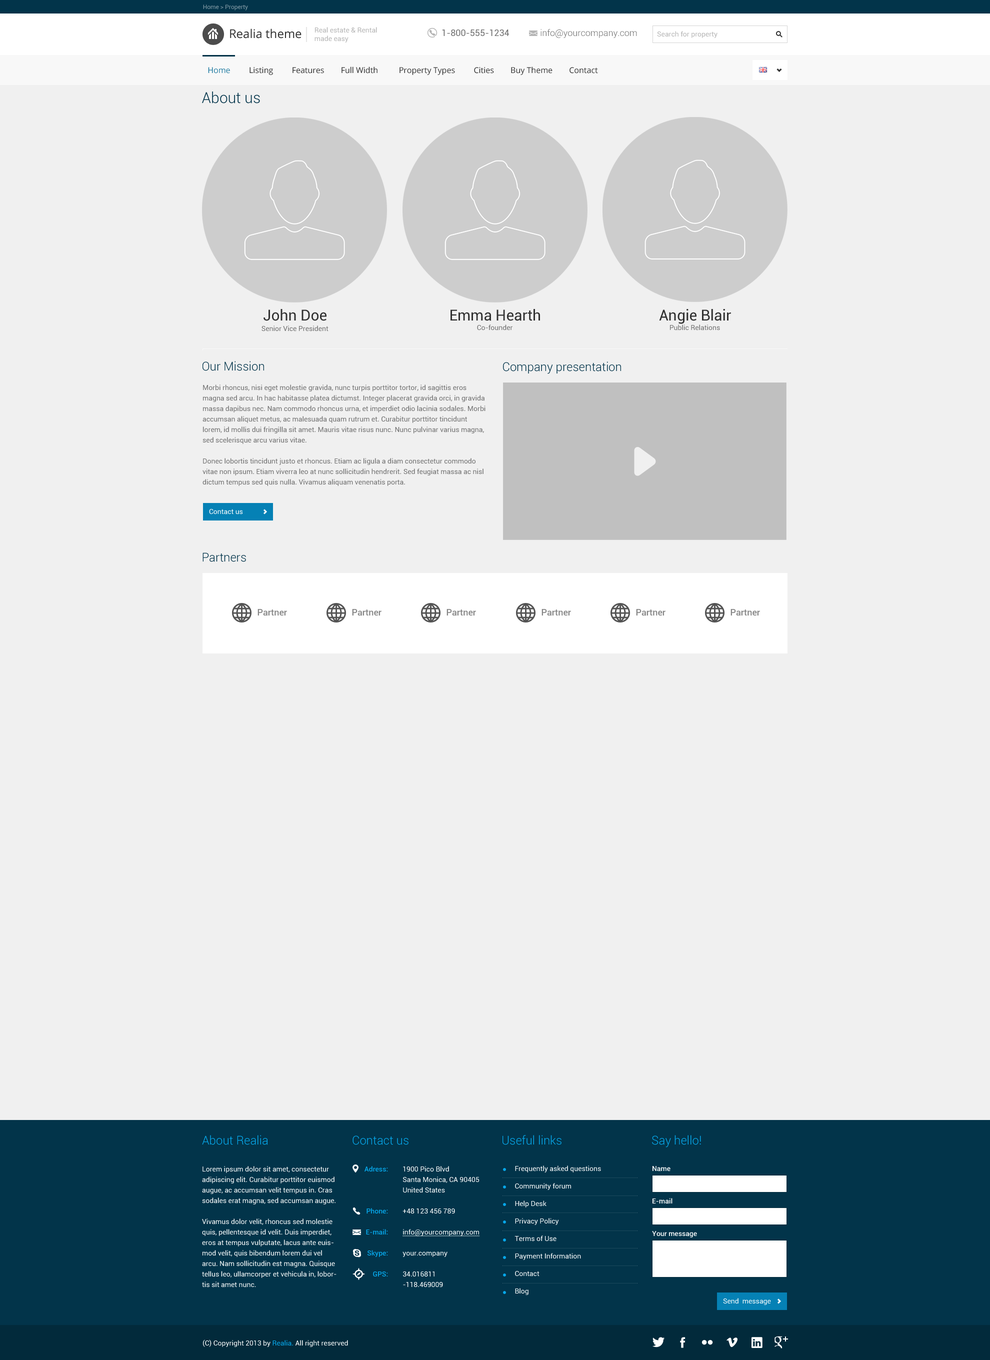
<style>
.page{position:relative;width:990px;height:1360px;background:#f0f0f0}
.page>*{position:absolute;margin:0}
.t1{font:6px "Roboto-Regular";color:#819aa5}
.t2{font:12px "OpenSans";color:#313131}
.t3{font:7px "Roboto-Regular";color:#b5b5b5}
.t4{font:9px "Roboto-Regular";color:#707070}
.t5{font:9px "Roboto-Light";color:#707070}
.t6{font:8px "OpenSans";color:#313131}
.t7{font:8px "OpenSans";color:#1d79a0}
.t8{font:15px "Roboto-Light";color:#02344a}
.t9{font:15px "Roboto-Regular";color:#313131}
.t10{font:7px "Roboto-Regular";color:#707070}
.t11{font:12px "Roboto-Light";color:#02344a}
.t12{font:7px/10.5px "Roboto-Regular";color:#707070}
.t13{font:7px "Roboto-Regular";color:#ffffff}
.t14{font:9px "Roboto-Medium";color:#868686}
.t15{font:12px "Roboto-Light";color:#06a7ea}
.t16{font:7px/10.5px "Roboto-Regular";color:#ffffff}
.t17{font:7px/10.5px "Roboto-Medium";color:#06a7ea}
.t18{font:7px/10.5px "Roboto-Regular";color:#ffffff;text-decoration:underline}
.t19{font:7px/17.5px "Roboto-Regular";color:#ffffff}
.t20{font:7px "Roboto-Medium";color:#ffffff}
.t21{font:7px "Roboto-Regular";color:#06a7ea}
</style>
<div class="page">
<p class="t1" style="left:203px;top:4px;width:45px;height:6px">Home &gt; Property</p>
<p class="t2" style="left:230px;top:28px;width:72px;height:10px">Realia theme</p>
<p class="t3" style="left:314px;top:27px;width:63px;height:15px">Real estate &amp; Rental<br>made easy</p>
<p class="t4" style="left:442px;top:30px;width:67px;height:6px">1-800-555-1234</p>
<p class="t5" style="left:540px;top:29px;width:97px;height:9px">info@yourcompany.com</p>
<p class="t3" style="left:657px;top:31px;width:61px;height:7px">Search for property</p>
<p class="t6" style="left:208px;top:66px;width:390px;height:9px"><span class="t7">Home         </span>Listing         Features        Full Width          Property Types         Cities        Buy Theme        Contact</p>
<p class="t8" style="left:202px;top:92px;width:58px;height:12px">About us</p>
<p class="t9" style="left:264px;top:309px;width:62px;height:12px">John Doe</p>
<p class="t9" style="left:450px;top:309px;width:90px;height:12px">Emma Hearth</p>
<p class="t9" style="left:659px;top:309px;width:72px;height:15px">Angie Blair</p>
<p class="t10" style="left:262px;top:326px;width:66px;height:5px">Senior Vice President</p>
<p class="t10" style="left:477px;top:324px;width:36px;height:6px">Co-founder</p>
<p class="t10" style="left:670px;top:324px;width:50px;height:6px">Public Relations</p>
<p class="t11" style="left:202px;top:361px;width:62px;height:10px">Our Mission</p>
<p class="t11" style="left:503px;top:362px;width:118px;height:12px">Company presentation</p>
<p class="t12" style="left:202px;top:384px;width:284px;height:102px">Morbi rhoncus, nisi eget molestie gravida, nunc turpis porttitor tortor, id sagittis eros magna sed arcu. In hac habitasse platea dictumst. Integer placerat gravida orci, in gravida massa dapibus nec. Nam commodo rhoncus urna, et imperdiet odio lacinia sodales. Morbi accumsan aliquet metus, ac malesuada quam rutrum et. Curabitur porttitor tincidunt lorem, id mollis dui fringilla sit amet. Mauris vitae risus nunc. Nunc pulvinar varius magna, sed scelerisque arcu varius vitae.<br><br>Donec lobortis tincidunt justo et rhoncus. Etiam ac ligula a diam consectetur commodo vitae non ipsum. Etiam viverra leo at nunc sollicitudin hendrerit. Sed feugiat massa ac nisl dictum tempus sed quis nulla. Vivamus aliquam venenatis porta.<br>Quisque eget velit dictum orci luctus lacinia. Donec eget augue non sem ornare eleifend.</p>
<p class="t13" style="left:209px;top:509px;width:33px;height:5px">Contact us</p>
<p class="t11" style="left:202px;top:552px;width:44px;height:10px">Partners</p>
<p class="t14" style="left:258px;top:609px;width:29px;height:7px">Partner</p>
<p class="t14" style="left:352px;top:609px;width:30px;height:7px">Partner</p>
<p class="t14" style="left:446px;top:609px;width:30px;height:7px">Partner</p>
<p class="t14" style="left:542px;top:609px;width:29px;height:7px">Partner</p>
<p class="t14" style="left:636px;top:609px;width:30px;height:7px">Partner</p>
<p class="t14" style="left:730px;top:609px;width:30px;height:7px">Partner</p>
<p class="t15" style="left:202px;top:1135px;width:66px;height:10px">About Realia</p>
<p class="t15" style="left:352px;top:1136px;width:56px;height:9px">Contact us</p>
<p class="t15" style="left:502px;top:1135px;width:60px;height:10px">Useful links</p>
<p class="t15" style="left:652px;top:1135px;width:49px;height:13px">Say hello!</p>
<p class="t16" style="left:202px;top:1166px;width:134px;height:122px">Lorem ipsum dolor sit amet, consectetur adipiscing elit. Curabitur porttitor euismod augue, ac accumsan velit tempus in. Cras sodales erat magna, sed accumsan augue. <br><br>Vivamus dolor velit, rhoncus sed molestie quis, pellentesque id velit. Duis imperdiet, eros at tempus vulputate, lacus ante euismod velit, quis bibendum lorem dui vel arcu. Nam sollicitudin est magna. Quisque tellus leo, ullamcorper et vehicula in, lobortis sit amet nunc.</p>
<p class="t17" style="left:364px;top:1166px;width:24px;height:110px;text-align:right">Adress:<br><br><br><br>Phone:<br><br>E-mail:<br><br>Skype:<br><br>GPS:</p>
<p class="t16" style="left:402px;top:1166px;width:78px;height:121px">1900 Pico Blvd<br>Santa Monica, CA 90405<br>United States<br><br>+48 123 456 789<br><br><span class="t18">info@yourcompany.com<br><br></span>your.company<br><br>34.016811<br>-118.469009</p>
<p class="t19" style="left:514px;top:1166px;width:87px;height:129px">Frequently asked questions<br>Community forum<br>Help Desk<br>Privacy Policy<br>Terms of Use<br>Payment Information<br>Contact <br>Blog</p>
<p class="t20" style="left:652px;top:1166px;width:18px;height:6px">Name</p>
<p class="t20" style="left:652px;top:1198px;width:20px;height:6px">E-mail</p>
<p class="t20" style="left:652px;top:1231px;width:45px;height:7px">Your message</p>
<p class="t13" style="left:723px;top:1298px;width:48px;height:7px">Send  message</p>
<p class="t13" style="left:203px;top:1340px;width:145px;height:7px">(C) Copyright 2013 by <span class="t21">Realia. </span>All right reserved</p>
</div>
